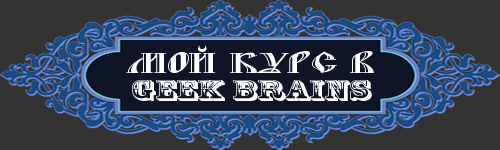
<style>
.page{position:relative;width:500px;height:150px;background:#333333}
.page>*{position:absolute;margin:0}
.t1{font:27.8px/25px "RosewoodStd-Regular";color:#ffffff;scale:1.5 1}
.t2{font:27.8px/25px "BlagovestFiveDecor";color:#ffffff;scale:1.5 1}
</style>
<div class="page">
<p class="t1" style="left:126px;top:45px;width:248px;height:56px;text-align:center"><span class="t2">Мой курс в<br></span>Geek Brains</p>
</div>
